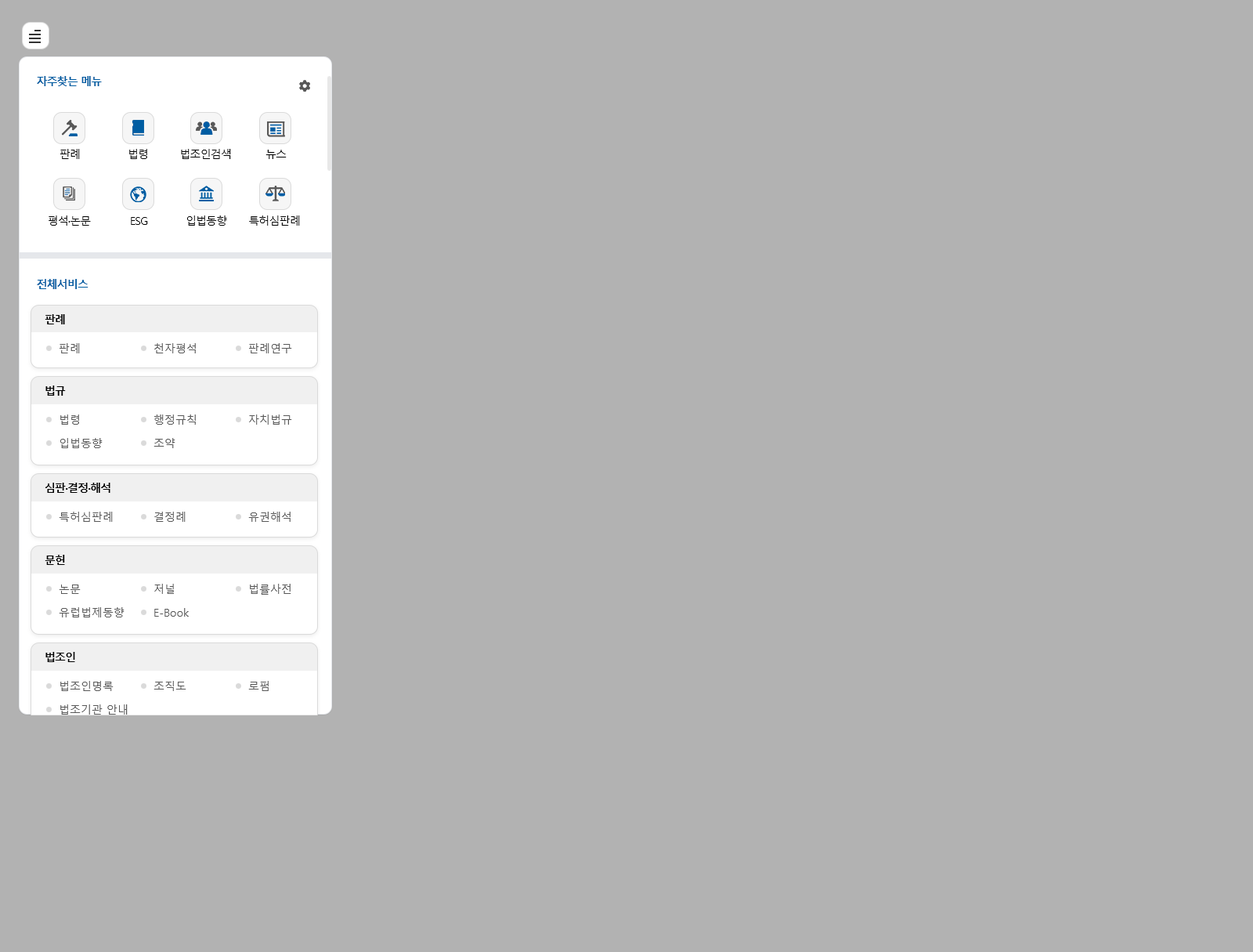
<style>
.page{position:relative;width:1253px;height:952px;background:#b2b2b2}
.page>*{position:absolute;margin:0}
.t1{font:11px "MalgunGothicBold";letter-spacing:-0.06em;color:#005da2}
.t2{font:11px "MalgunGothic";letter-spacing:-0.06em;color:#000000}
.t3{font:11px "MalgunGothicBold";letter-spacing:-0.06em;color:#000000}
.t4{font:11px "MalgunGothic";color:#585858}
.t5{font:11px/23.5px "MalgunGothic";color:#585858}
</style>
<div class="page">
<p class="t1" style="left:37px;top:76px;width:65px;height:10px">자주찾는 메뉴</p>
<p class="t2" style="left:60px;top:149px;width:20px;height:10px">판례</p>
<p class="t2" style="left:129px;top:149px;width:18px;height:10px">법령</p>
<p class="t2" style="left:181px;top:149px;width:50px;height:10px">법조인검색</p>
<p class="t2" style="left:266px;top:150px;width:21px;height:9px">뉴스</p>
<p class="t2" style="left:49px;top:215px;width:42px;height:11px">평석·논문</p>
<p class="t2" style="left:131px;top:217px;width:17px;height:8px">ESG</p>
<p class="t2" style="left:187px;top:215px;width:40px;height:11px">입법동향</p>
<p class="t2" style="left:249px;top:215px;width:51px;height:11px">특허심판례</p>
<p class="t1" style="left:37px;top:279px;width:52px;height:10px">전체서비스</p>
<p class="t3" style="left:45px;top:314px;width:20px;height:10px">판례</p>
<p class="t4" style="left:60px;top:343px;width:20px;height:10px">판례</p>
<p class="t4" style="left:154px;top:343px;width:42px;height:10px">천자평석</p>
<p class="t4" style="left:249px;top:343px;width:43px;height:10px">판례연구</p>
<p class="t3" style="left:45px;top:385px;width:21px;height:11px">법규</p>
<p class="t5" style="left:60px;top:414px;width:43px;height:34px">법령<br>입법동향</p>
<p class="t5" style="left:154px;top:414px;width:42px;height:34px">행정규칙<br>조약</p>
<p class="t4" style="left:249px;top:414px;width:43px;height:10px">자치법규​</p>
<p class="t3" style="left:45px;top:482px;width:65px;height:11px">심판·결정·해석</p>
<p class="t5" style="left:59px;top:511px;width:54px;height:11px">특허심판례<br>​</p>
<p class="t4" style="left:154px;top:511px;width:32px;height:11px">결정례</p>
<p class="t4" style="left:248px;top:511px;width:43px;height:11px">유권해석​</p>
<p class="t3" style="left:45px;top:555px;width:20px;height:10px">문헌</p>
<p class="t5" style="left:59px;top:584px;width:66px;height:33px">논문<br>유럽법제동향</p>
<p class="t5" style="left:154px;top:583px;width:35px;height:33px">저널<br>E-Book</p>
<p class="t4" style="left:250px;top:583px;width:41px;height:11px">법률사전​</p>
<p class="t3" style="left:45px;top:652px;width:30px;height:10px">법조인</p>
<p class="t5" style="left:60px;top:681px;width:68px;height:33px">법조인명록<br>법조기관 안내</p>
<p class="t4" style="left:154px;top:681px;width:32px;height:10px">조직도</p>
<p class="t4" style="left:248px;top:681px;width:21px;height:10px">로펌​</p>
</div>
